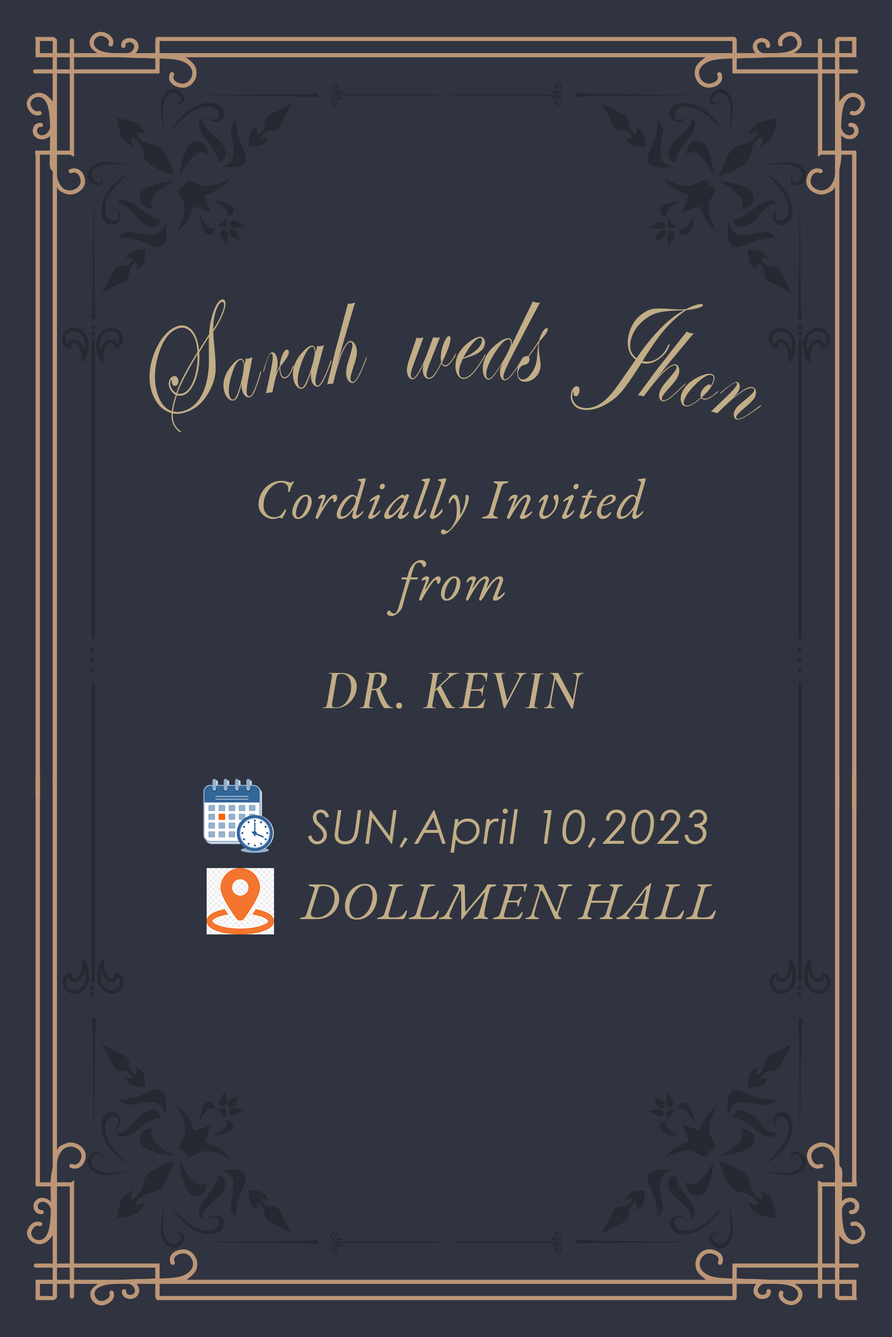
<style>
.page{position:relative;width:892px;height:1337px;background:#303440}
.page>*{position:absolute;margin:0}
.t1{font:70.8px "EdwardianScriptITC";letter-spacing:0.025em;color:#c1ad86}
.t2{font:56px "EBGaramond-Italic";letter-spacing:0.025em;color:#c1ad86}
.t3{font:56px "CormorantInfant-SemiBoldItalic";letter-spacing:0.025em;color:#c1ad86;text-transform:uppercase}
.t4{font:47px "CenturyGothic-Italic";letter-spacing:0.025em;color:#c1ad86}
.t5{font:52.1px "EBGaramond-Italic";letter-spacing:0.025em;color:#c1ad86}
</style>
<div class="page">
<p class="t1" style="left:149px;top:299px;width:612px;height:133px;text-align:center">Sarah  weds  Jhon</p>
<p class="t2" style="left:258px;top:478px;width:387px;height:56px">Cordially Invited</p>
<p class="t2" style="left:387px;top:560px;width:118px;height:56px">from</p>
<p class="t3" style="left:322px;top:673px;width:262px;height:36px">DR. Kevin</p>
<p class="t4" style="left:308px;top:809px;width:399px;height:44px">SUN,April 10,2023</p>
<p class="t5" style="left:300px;top:883px;width:416px;height:37px">DOLLMEN HALL</p>
</div>
